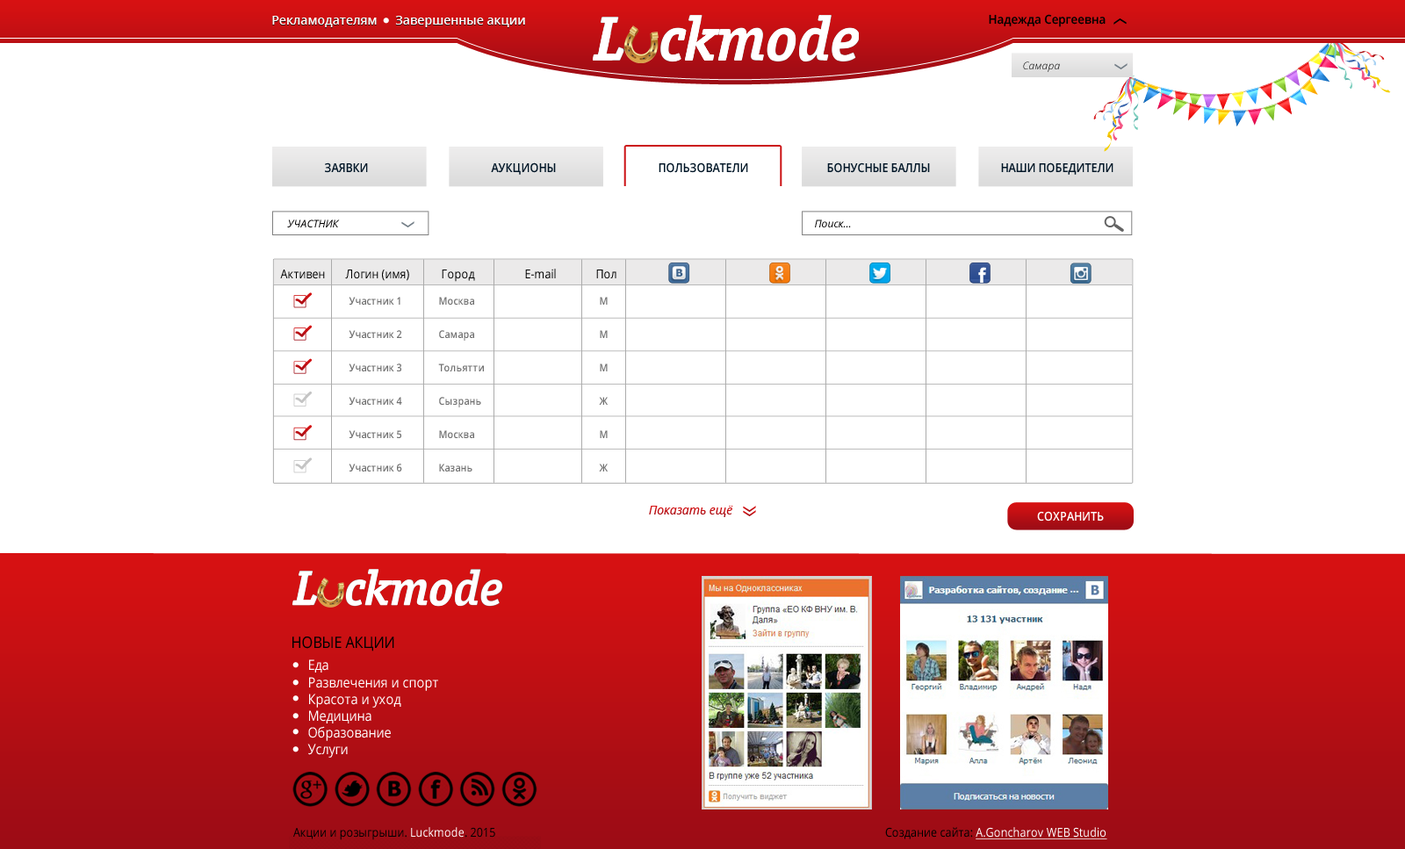
<style>
.page{position:relative;width:1405px;height:849px;background:#ffffff}
.page>*{position:absolute;margin:0}
.t1{font:12.3px "OpenSans-Semibold";color:#fdfffc}
.t2{font:12.3px "OpenSans-Semibold";color:#ffffff}
.t3{font:12.3px "OpenSans-Semibold";color:#000100;scale:0.95 1}
.t4{font:10.5px "OpenSansLight-Italic"}
.t5{font:12.3px "OpenSans-Semibold";color:#011627;text-transform:uppercase;scale:0.9 1}
.t6{font:10.5px "OpenSans-Italic";color:#010000;text-transform:uppercase}
.t7{font:10.5px "OpenSans-Italic";color:#010000}
.t8{font:12.3px "OpenSans";color:#000000;scale:0.9 1}
.t9{font:10.5px/33.4px "OpenSans-Semibold";color:#707070;scale:0.9 1}
.t10{font:12.3px "OpenSans-Italic";color:#c20f13}
.t11{font:12.3px "OpenSans-Semibold";color:#ffffff;text-transform:uppercase;scale:0.9 1}
</style>
<div class="page">
<p class="t1" style="left:272px;top:16px;width:105px;height:11px">Рекламодателям</p>
<p class="t2" style="left:395px;top:16px;width:130px;height:11px">Завершенные акции</p>
<p class="t3" style="left:989px;top:14px;width:116px;height:13px">Надежда Сергеевна</p>
<p class="t4" style="left:1023px;top:61px;width:37px;height:11px">Самара</p>
<p class="t5" style="left:325px;top:162px;width:43px;height:11px">заявки</p>
<p class="t5" style="left:491px;top:162px;width:65px;height:13px">аукционы</p>
<p class="t5" style="left:658px;top:162px;width:90px;height:11px">пользователи</p>
<p class="t5" style="left:827px;top:162px;width:103px;height:11px">бонусные баллы</p>
<p class="t5" style="left:1001px;top:162px;width:112px;height:13px">наши победители</p>
<p class="t6" style="left:287px;top:219px;width:53px;height:8px">УЧАСТНИК</p>
<p class="t7" style="left:815px;top:219px;width:36px;height:8px">Поиск...</p>
<p class="t8" style="left:280px;top:270px;width:45px;height:9px">Активен</p>
<p class="t8" style="left:345px;top:270px;width:64px;height:11px">Логин (имя)</p>
<p class="t8" style="left:442px;top:270px;width:33px;height:12px">Город</p>
<p class="t8" style="left:525px;top:269px;width:31px;height:10px">E-mail</p>
<p class="t8" style="left:596px;top:270px;width:20px;height:9px">Пол</p>
<p class="t9" style="left:349px;top:297px;width:53px;height:174px">Участник 1<br>Участник 2<br>Участник 3<br>Участник 4<br>Участник 5<br>Участник 6</p>
<p class="t9" style="left:438px;top:297px;width:46px;height:174px">Москва<br>Самара<br>Тольятти<br>Сызрань<br>Москва<br>Казань</p>
<p class="t9" style="left:599px;top:297px;width:9px;height:174px">М<br>М<br>М<br>Ж<br>М<br>Ж</p>
<p class="t10" style="left:649px;top:506px;width:84px;height:11px">Показать ещё</p>
<p class="t11" style="left:1037px;top:511px;width:67px;height:10px">сохранить</p>
</div>
